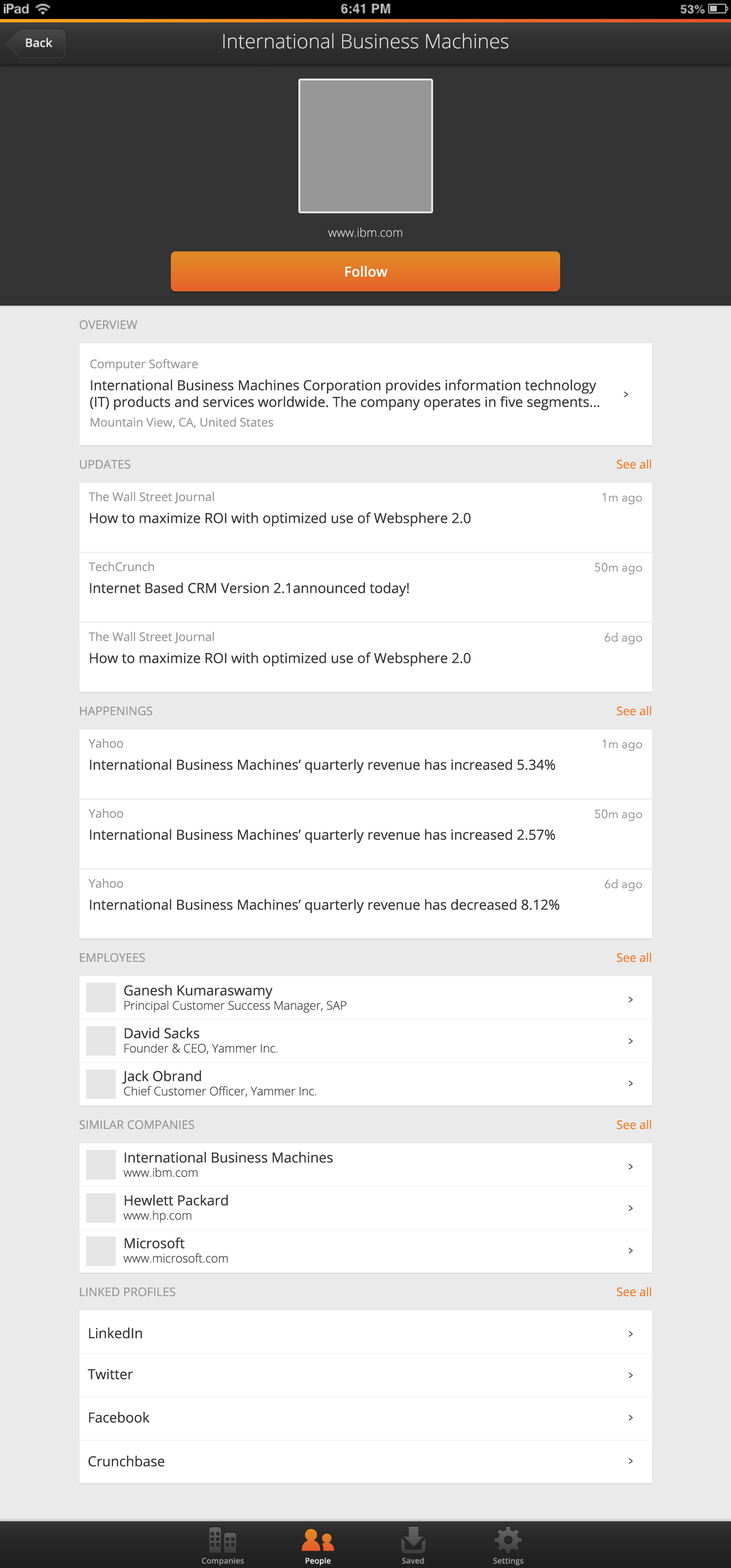
<style>
.page{position:relative;width:731px;height:1568px;background:#ffffff}
.page>*{position:absolute;margin:0}
.t1{font:11.9px "OpenSans-Semibold";color:#e5e5e5}
.t2{font:19.8px "OpenSans-Light";color:#e5e5e5}
.t3{font:11.9px "OpenSans-Light";color:#e5e5e5}
.t4{font:13.9px "OpenSans-Semibold";color:#ffffff}
.t5{font:11.9px "OpenSans";color:#969696}
.t6{font:13.9px "OpenSans";color:#343434}
.t7{font:11.9px "OpenSans";color:#343434;scale:0.64 1}
.t8{font:11.9px "OpenSans";color:#ec7a27}
.t9{font:11.9px "AvenirNext-Regular";color:#969696}
.t10{font:11.9px "OpenSans-Light";color:#343434}
.t11{font:7.9px "OpenSans-Semibold";color:#969696}
.t12{font:7.9px "OpenSans-Semibold";color:#e5e5e5}
</style>
<div class="page">
<p class="t1" style="left:26px;top:38px;width:27px;height:9px">Back</p>
<p class="t2" style="left:223px;top:33px;width:286px;height:16px">International Business Machines</p>
<p class="t3" style="left:328px;top:228px;width:74px;height:9px">www.ibm.com</p>
<p class="t4" style="left:345px;top:266px;width:43px;height:11px">Follow</p>
<p class="t5" style="left:80px;top:320px;width:58px;height:10px">OVERVIEW</p>
<p class="t6" style="left:90px;top:359px;width:510px;height:69px"><span class="t5">Computer Software<br></span>International Business Machines Corporation provides information technology (IT) products and services worldwide. The company operates in five segments…<br><span class="t5">Mountain View, CA, United States</span></p>
<p class="t7" style="left:624px;top:391px;width:5px;height:7px">&gt;</p>
<p class="t5" style="left:80px;top:459px;width:50px;height:10px">UPDATES</p>
<p class="t8" style="left:617px;top:459px;width:34px;height:10px">See all</p>
<p class="t6" style="left:89px;top:492px;width:382px;height:35px"><span class="t5">The Wall Street Journal<br></span>How to maximize ROI with optimized use of Websphere 2.0</p>
<p class="t9" style="left:602px;top:493px;width:40px;height:12px">1m ago</p>
<p class="t6" style="left:89px;top:562px;width:320px;height:35px"><span class="t5">TechCrunch<br></span>Internet Based CRM Version 2.1announced today!</p>
<p class="t9" style="left:595px;top:562px;width:47px;height:13px">50m ago</p>
<p class="t6" style="left:89px;top:632px;width:382px;height:35px"><span class="t5">The Wall Street Journal<br></span>How to maximize ROI with optimized use of Websphere 2.0</p>
<p class="t9" style="left:605px;top:632px;width:37px;height:13px">6d ago</p>
<p class="t5" style="left:80px;top:706px;width:72px;height:10px">HAPPENINGS</p>
<p class="t8" style="left:617px;top:706px;width:34px;height:10px">See all</p>
<p class="t6" style="left:89px;top:739px;width:467px;height:34px"><span class="t5">Yahoo<br></span>International Business Machines’ quarterly revenue has increased 5.34%</p>
<p class="t9" style="left:602px;top:739px;width:40px;height:12px">1m ago</p>
<p class="t6" style="left:89px;top:809px;width:467px;height:34px"><span class="t5">Yahoo<br></span>International Business Machines’ quarterly revenue has increased 2.57%</p>
<p class="t9" style="left:595px;top:809px;width:47px;height:12px">50m ago</p>
<p class="t6" style="left:89px;top:879px;width:471px;height:34px"><span class="t5">Yahoo<br></span>International Business Machines’ quarterly revenue has decreased 8.12%</p>
<p class="t9" style="left:605px;top:879px;width:37px;height:12px">6d ago</p>
<p class="t5" style="left:80px;top:953px;width:65px;height:9px">EMPLOYEES</p>
<p class="t8" style="left:617px;top:953px;width:34px;height:9px">See all</p>
<p class="t10" style="left:124px;top:985px;width:223px;height:28px"><span class="t6">Ganesh Kumaraswamy<br></span>Principal Customer Success Manager, SAP USA</p>
<p class="t7" style="left:629px;top:997px;width:4px;height:6px">&gt;</p>
<p class="t10" style="left:124px;top:1028px;width:154px;height:26px"><span class="t6">David Sacks<br></span>Founder &amp; CEO, Yammer Inc.</p>
<p class="t7" style="left:629px;top:1038px;width:4px;height:6px">&gt;</p>
<p class="t10" style="left:122px;top:1070px;width:195px;height:27px"><span class="t6">Jack Obrand<br></span>Chief Customer Officer, Yammer Inc.</p>
<p class="t7" style="left:629px;top:1080px;width:4px;height:7px">&gt;</p>
<p class="t5" style="left:80px;top:1120px;width:114px;height:9px">SIMILAR COMPANIES</p>
<p class="t8" style="left:617px;top:1120px;width:34px;height:9px">See all</p>
<p class="t6" style="left:123px;top:1152px;width:210px;height:25px">International Business Machines<br><span class="t10">www.ibm.com</span></p>
<p class="t7" style="left:629px;top:1164px;width:4px;height:6px">&gt;</p>
<p class="t6" style="left:123px;top:1195px;width:105px;height:28px">Hewlett Packard<br><span class="t10">www.hp.com</span></p>
<p class="t7" style="left:629px;top:1205px;width:4px;height:6px">&gt;</p>
<p class="t10" style="left:123px;top:1238px;width:105px;height:25px"><span class="t6">Microsoft<br></span>www.microsoft.com</p>
<p class="t7" style="left:629px;top:1248px;width:4px;height:6px">&gt;</p>
<p class="t5" style="left:80px;top:1287px;width:96px;height:10px">LINKED PROFILES</p>
<p class="t8" style="left:617px;top:1287px;width:34px;height:10px">See all</p>
<p class="t6" style="left:89px;top:1328px;width:53px;height:10px">LinkedIn</p>
<p class="t7" style="left:629px;top:1331px;width:4px;height:6px">&gt;</p>
<p class="t6" style="left:88px;top:1368px;width:45px;height:11px">Twitter</p>
<p class="t7" style="left:629px;top:1372px;width:4px;height:6px">&gt;</p>
<p class="t6" style="left:89px;top:1412px;width:61px;height:11px">Facebook</p>
<p class="t7" style="left:629px;top:1415px;width:4px;height:6px">&gt;</p>
<p class="t6" style="left:89px;top:1456px;width:76px;height:11px">Crunchbase</p>
<p class="t7" style="left:629px;top:1458px;width:4px;height:6px">&gt;</p>
<p class="t11" style="left:202px;top:1558px;width:42px;height:8px">Companies</p>
<p class="t12" style="left:306px;top:1558px;width:25px;height:8px">People</p>
<p class="t11" style="left:402px;top:1558px;width:22px;height:6px">Saved</p>
<p class="t11" style="left:493px;top:1558px;width:31px;height:8px">Settings</p>
</div>
